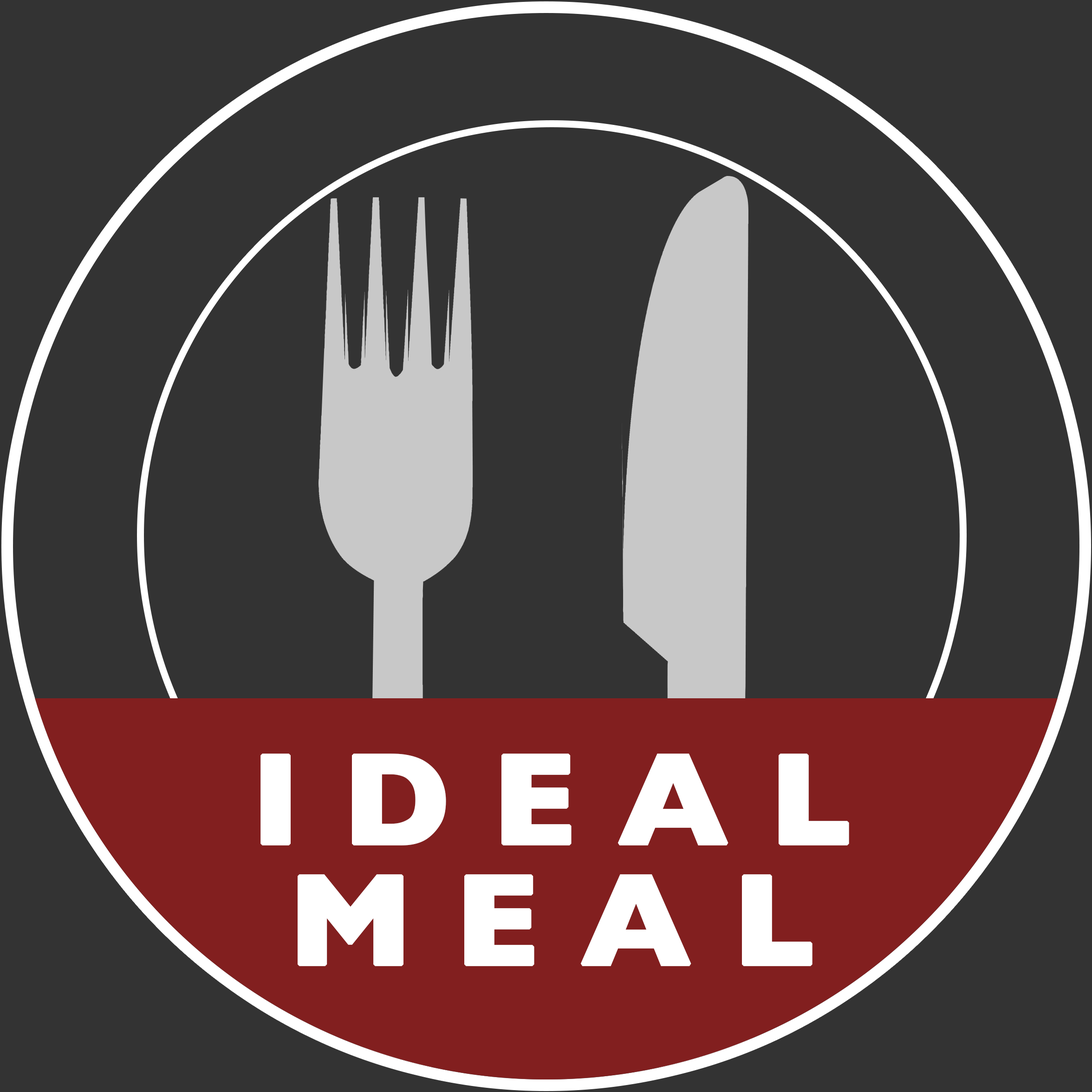
<style>
.page{position:relative;width:1092px;height:1092px;background:#333333}
.page>*{position:absolute;margin:0}
.t1{font:130px "GillSans-Bold";letter-spacing:0.3em;color:#ffffff;font-weight:bold}
</style>
<div class="page">
<p class="t1" style="left:260px;top:754px;width:589px;height:212px">IDEAL MEAL</p>
</div>
